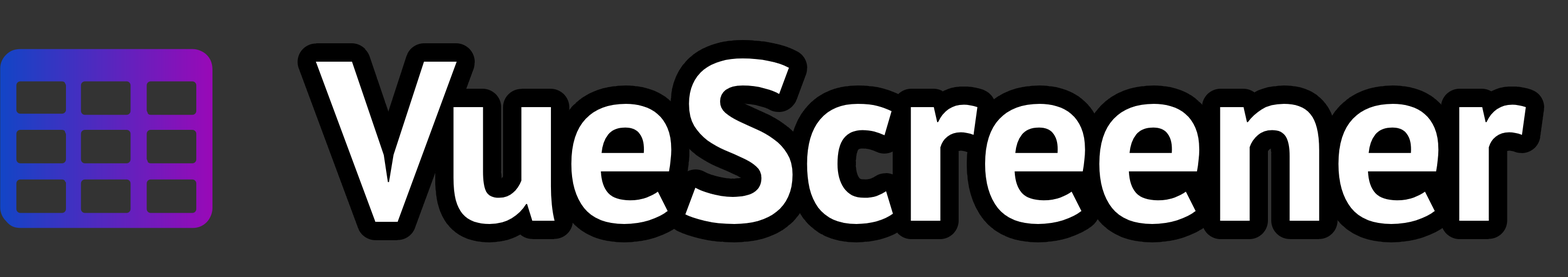
<style>
.page{position:relative;width:1568px;height:277px;background:#333333}
.page>*{position:absolute;margin:0}
.t1{font:227.1px "MyriadPro-Semibold";color:#ffffff}
</style>
<div class="page">
<p class="t1" style="left:316px;top:58px;width:1210px;height:166px">VueScreener</p>
</div>
